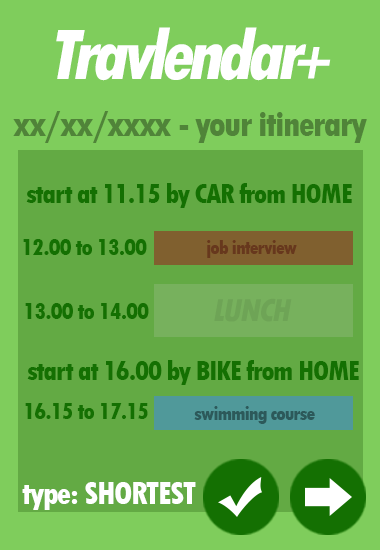
<style>
.page{position:relative;width:380px;height:550px;background:#63aa44}
.page>*{position:absolute;margin:0}
.t1{font:75px "TwCenMT-CondensedExtraBold";letter-spacing:-0.075em;color:#ffffff;font-style:italic}
.t2{font:58.3px "TwCenMT-CondensedExtraBold";letter-spacing:-0.075em;color:#ffffff;font-style:italic}
.t3{font:37.5px "TwCenMT-CondensedExtraBold";letter-spacing:-0.05em;color:#508439}
.t4{font:29.2px "TwCenMT-CondensedExtraBold";letter-spacing:-0.05em;color:#147002}
.t5{font:25px "TwCenMT-CondensedExtraBold";letter-spacing:-0.05em;color:#147002}
.t6{font:20.8px "TwCenMT-CondensedExtraBold";letter-spacing:-0.05em;color:#67381d}
.t7{font:25px/33.3px "TwCenMT-CondensedExtraBold";letter-spacing:-0.05em;color:#147002}
.t8{font:33.3px "TwCenMT-CondensedExtraBold";letter-spacing:-0.05em;color:#6ea456;font-style:italic}
.t9{font:20.8px "TwCenMT-CondensedExtraBold";letter-spacing:-0.05em;color:#2c595a}
.t10{font:33.3px "TwCenMT-CondensedExtraBold";letter-spacing:-0.05em;color:#ffffff}
</style>
<div class="page">
<p class="t1" style="left:56px;top:27px;width:251px;height:54px">Travlendar</p>
<p class="t2" style="left:297px;top:47px;width:34px;height:32px">+</p>
<p class="t3" style="left:13px;top:111px;width:354px;height:32px">xx/xx/xxxx - your itinerary</p>
<p class="t4" style="left:26px;top:183px;width:326px;height:25px">start at 11.15 by CAR from HOME</p>
<p class="t5" style="left:23px;top:239px;width:124px;height:16px">12.00 to 13.00</p>
<p class="t6" style="left:207px;top:240px;width:90px;height:18px">job interview</p>
<p class="t7" style="left:25px;top:303px;width:124px;height:116px">13.00 to 14.00<br><br><br>16.15 to 17.15</p>
<p class="t8" style="left:214px;top:298px;width:78px;height:24px">LUNCH</p>
<p class="t4" style="left:27px;top:360px;width:332px;height:25px">start at 16.00 by BIKE from HOME</p>
<p class="t9" style="left:194px;top:406px;width:121px;height:18px">swimming course</p>
<p class="t10" style="left:22px;top:482px;width:174px;height:28px">type: SHORTEST</p>
</div>
